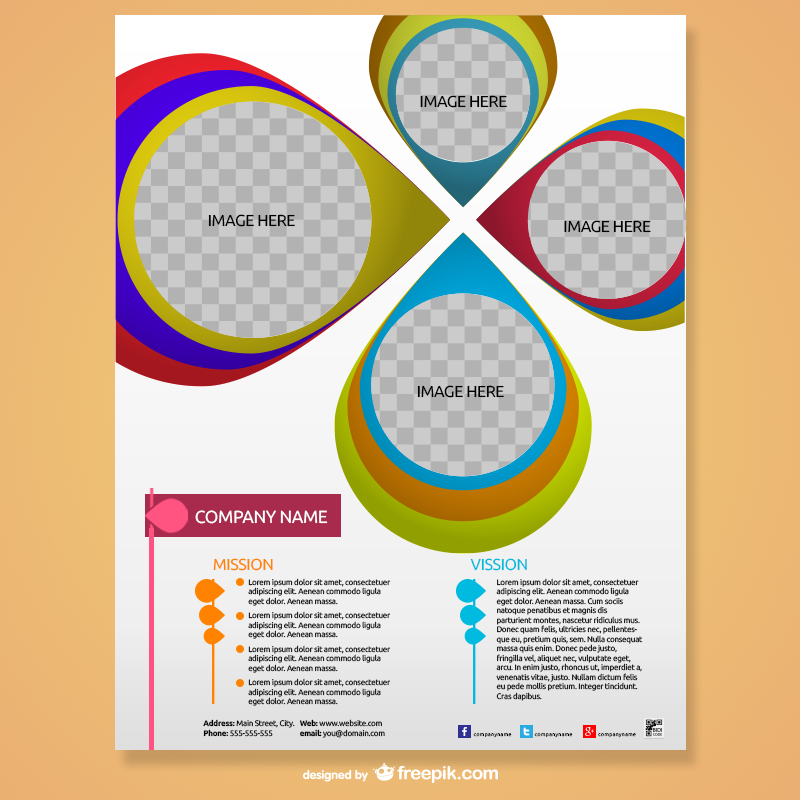
<style>
.page{position:relative;width:800px;height:800px}
.page>*{position:absolute;margin:0}
.t1{font:15.9px "Ubuntu";letter-spacing:-0.025em;color:#000000}
.t2{font:17.5px "Ubuntu";letter-spacing:-0.025em;color:#ffffff}
.t3{font:15.9px "Ubuntu";letter-spacing:-0.025em;color:#ff8200}
.t4{font:15.9px "Ubuntu";letter-spacing:-0.025em;color:#00bae0}
.t5{font:7.9px "Ubuntu";letter-spacing:-0.025em}
.t6{font:7.9px "Ubuntu";letter-spacing:-0.025em;color:#000000}
.t7{font:7.9px "Ubuntu-Bold";letter-spacing:-0.025em;color:#000000}
.t8{font:5px "Ubuntu-Light";letter-spacing:0.1em;color:#000000}
</style>
<div class="page">
<p class="t1" style="left:420px;top:95px;width:87px;height:13px">IMAGE HERE</p>
<p class="t1" style="left:208px;top:214px;width:87px;height:13px">IMAGE HERE</p>
<p class="t1" style="left:564px;top:220px;width:87px;height:13px">IMAGE HERE</p>
<p class="t1" style="left:417px;top:385px;width:87px;height:13px">IMAGE HERE</p>
<p class="t2" style="left:195px;top:510px;width:133px;height:14px">COMPANY NAME</p>
<p class="t3" style="left:213px;top:558px;width:60px;height:13px">MISSION</p>
<p class="t4" style="left:470px;top:558px;width:57px;height:13px">VISSION</p>
<p class="t5" style="left:248px;top:578px;width:143px;height:28px">Lorem ipsum dolor sit amet, consectetuer adipiscing elit. Aenean commodo ligula eget dolor. Aenean massa.</p>
<p class="t6" style="left:496px;top:578px;width:147px;height:123px">Lorem ipsum dolor sit amet, consectetuer adipiscing elit. Aenean commodo ligula eget dolor. Aenean massa. Cum sociis natoque penatibus et magnis dis parturient montes, nascetur ridiculus mus. Donec quam felis, ultricies nec, pellentesque eu, pretium quis, sem. Nulla consequat massa quis enim. Donec pede justo, fringilla vel, aliquet nec, vulputate eget, arcu. In enim justo, rhoncus ut, imperdiet a, venenatis vitae, justo. Nullam dictum felis eu pede mollis pretium. Integer tincidunt. Cras dapibus.</p>
<p class="t5" style="left:248px;top:611px;width:143px;height:28px">Lorem ipsum dolor sit amet, consectetuer adipiscing elit. Aenean commodo ligula eget dolor. Aenean massa.</p>
<p class="t5" style="left:248px;top:645px;width:143px;height:28px">Lorem ipsum dolor sit amet, consectetuer adipiscing elit. Aenean commodo ligula eget dolor. Aenean massa.</p>
<p class="t5" style="left:248px;top:678px;width:143px;height:28px">Lorem ipsum dolor sit amet, consectetuer adipiscing elit. Aenean commodo ligula eget dolor. Aenean massa.</p>
<p class="t6" style="left:203px;top:719px;width:92px;height:18px"><span class="t7">Address: </span>Main Street, City. <br><span class="t7">Phone:</span> 555-555-555</p>
<p class="t6" style="left:299px;top:719px;width:86px;height:19px"><span class="t7">Web: </span>www.website.com <br><span class="t7">email:</span> you@domain.com</p>
<p class="t8" style="left:473px;top:733px;width:39px;height:5px">companyname</p>
<p class="t8" style="left:534px;top:733px;width:39px;height:5px">companyname</p>
<p class="t8" style="left:598px;top:733px;width:38px;height:5px">companyname</p>
</div>
